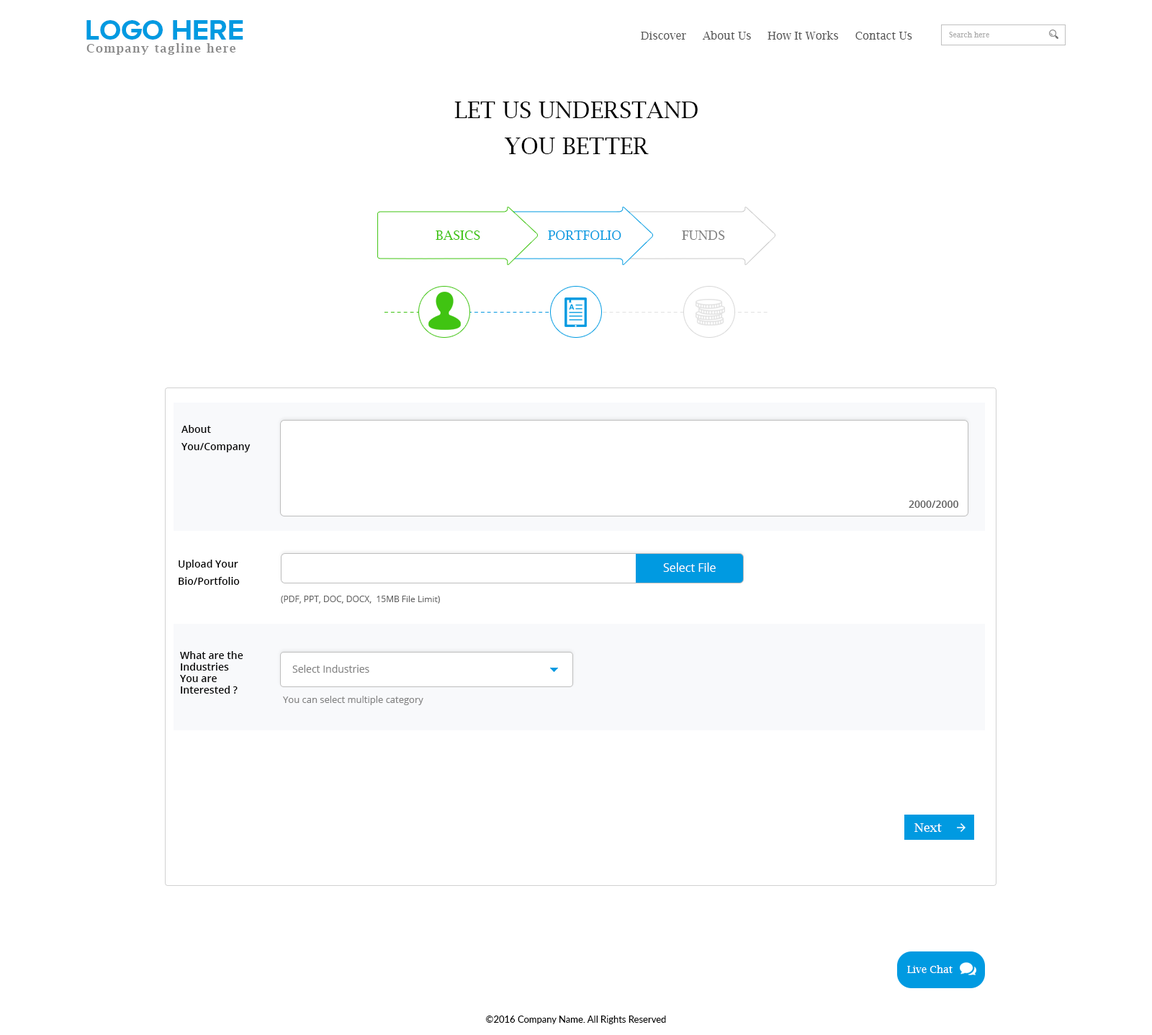
<style>
.page{position:relative;width:1152px;height:1035px;background:#ffffff}
.page>*{position:absolute;margin:0}
.t1{font:28.8px "ProximaNovaA-Bold";color:#009ae1;text-transform:uppercase}
.t2{font:10.8px "LucidaBright";color:#585858}
.t3{font:7.2px "LucidaBright";color:#afafaf}
.t4{font:11.5px "LucidaBright-Demi";letter-spacing:0.1em;color:#898989}
.t5{font:23px/36px "LucidaBright";color:#000000;text-transform:uppercase}
.t6{font:13px "LucidaBright";color:#40c412}
.t7{font:13px "LucidaBright";color:#009ae1}
.t8{font:13px "LucidaBright";color:#818181;text-transform:uppercase}
.t9{font:15.1px "LucidaBright";letter-spacing:0.1em;color:#e1e1e1}
.t10{font:15.1px "LucidaBright";letter-spacing:0.1em;color:#40c412}
.t11{font:15.1px "LucidaBright";letter-spacing:0.1em;color:#009ae1}
.t12{font:10.1px/17.3px "OpenSans-Semibold";color:#000000}
.t13{font:10.1px "OpenSans-Semibold";color:#5a5a5a}
.t14{font:11.5px "OpenSans";color:#ffffff}
.t15{font:8.6px "OpenSans";color:#666666}
.t16{font:10.1px/11.5px "OpenSans-Semibold";color:#000000}
.t17{font:10.1px "OpenSans";color:#838383}
.t18{font:9.4px "OpenSans";color:#838383}
.t19{font:12.2px "LucidaBright";color:#ffffff}
.t20{font:10.1px "LucidaBright";color:#ffffff}
.t21{font:9.4px "Lato-Regular";color:#000000}
</style>
<div class="page">
<p class="t1" style="left:86px;top:20px;width:157px;height:20px">Logo HERE</p>
<p class="t2" style="left:641px;top:31px;width:271px;height:9px">Discover     About Us     How It Works     Contact Us</p>
<p class="t3" style="left:949px;top:32px;width:40px;height:5px">Search here</p>
<p class="t4" style="left:86px;top:43px;width:149px;height:12px">Company tagline here</p>
<p class="t5" style="left:454px;top:102px;width:244px;height:52px;text-align:center">Let us understand<br>you better</p>
<p class="t6" style="left:436px;top:230px;width:44px;height:10px">BASICS</p>
<p class="t7" style="left:548px;top:230px;width:73px;height:10px">PORTFOLIO</p>
<p class="t8" style="left:682px;top:230px;width:43px;height:10px">FUNDS</p>
<p class="t9" style="left:384px;top:312px;width:384px;height:1px"><span class="t10">-------------</span><span class="t11">---------------------</span>--------------------------</p>
<p class="t12" style="left:181px;top:425px;width:70px;height:27px">About<br>You/Company</p>
<p class="t13" style="left:909px;top:501px;width:50px;height:7px">2000/2000</p>
<p class="t12" style="left:179px;top:560px;width:61px;height:25px">Upload Your <br>Bio/Portfolio</p>
<p class="t14" style="left:663px;top:562px;width:53px;height:10px">Select File</p>
<p class="t15" style="left:281px;top:596px;width:159px;height:7px">(PDF, PPT, DOC, DOCX,  15MB File Limit)</p>
<p class="t16" style="left:180px;top:651px;width:63px;height:43px">What are the<br>Industries<br>You are<br>Interested ?</p>
<p class="t17" style="left:292px;top:665px;width:77px;height:8px">Select Industries</p>
<p class="t18" style="left:283px;top:696px;width:140px;height:9px">You can select multiple category</p>
<p class="t19" style="left:915px;top:823px;width:27px;height:9px">Next</p>
<p class="t20" style="left:907px;top:965px;width:46px;height:8px">Live Chat</p>
<p class="t21" style="left:486px;top:1015px;width:180px;height:9px">©2016 Company Name. All Rights Reserved</p>
</div>
